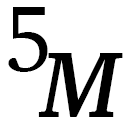
<style>
.page{position:relative;width:128px;height:128px;background:#ffffff}
.page>*{position:absolute;margin:0}
.t1{font:96px "Charter-Roman";letter-spacing:-0.025em;color:#000000;scale:0.93 1}
.t2{font:96px "Charter-BoldItalic";letter-spacing:-0.025em;color:#000000;scale:0.93 1}
</style>
<div class="page">
<p class="t1" style="left:8px;top:7px;width:40px;height:65px">5</p>
<p class="t2" style="left:38px;top:53px;width:85px;height:64px">M</p>
</div>
